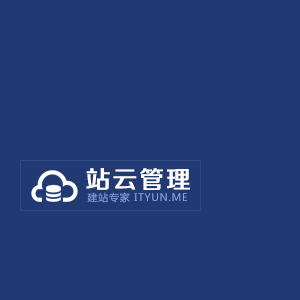
<style>
.page{position:relative;width:300px;height:300px;background:#223a73}
.page>*{position:absolute;margin:0}
.t1{font:24.5px "FZZZHUNHJW--GB1-0";letter-spacing:0.068em;color:#ffffff;font-weight:bold}
.t2{font:10.1px "MicrosoftYaHei";letter-spacing:0.068em;color:#8da6e1}
</style>
<div class="page">
<p class="t1" style="left:86px;top:168px;width:104px;height:22px">站云管理</p>
<p class="t2" style="left:87px;top:192px;width:100px;height:11px">建站专家 ITYUN.ME</p>
</div>
